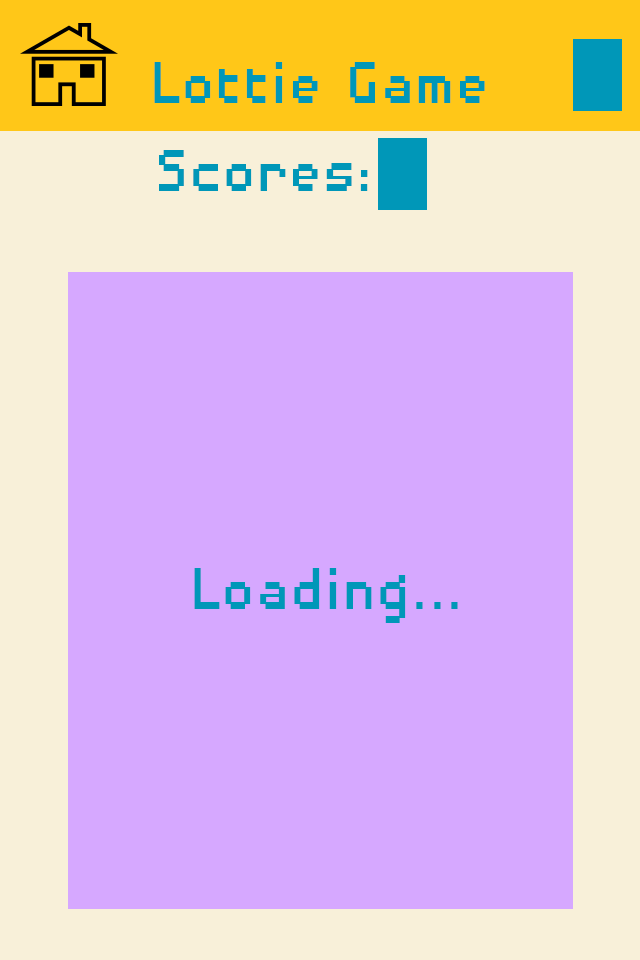
<style>
.page{position:relative;width:640px;height:960px;background:#d6a8ff}
.page>*{position:absolute;margin:0}
.t1{font:76.6px "DisposableDroidBB";color:#0097b8;scale:0.91 1}
</style>
<div class="page">
<p class="t1" style="left:154px;top:62px;width:331px;height:41px">Lottie Game</p>
<p class="t1" style="left:159px;top:150px;width:209px;height:41px">Scores:</p>
</div>
